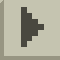
<style>
.page{position:relative;width:60px;height:60px;background:#c5c4b0}
.page>*{position:absolute;margin:0}
.t1{font:90px "ReturnOfGanonReg";letter-spacing:0.2em;color:#49483f}
</style>
<div class="page">
<p class="t1" style="left:21px;top:7px;width:23px;height:40px">&gt;</p>
</div>
